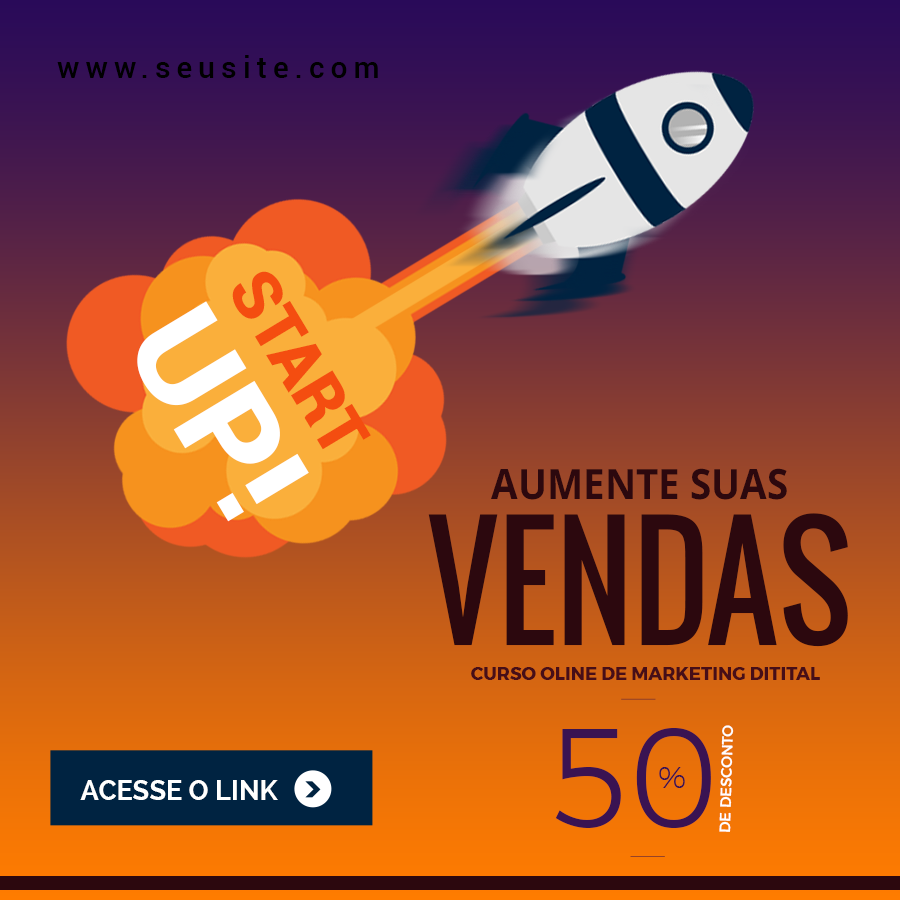
<style>
.page{position:relative;width:900px;height:900px}
.page>*{position:absolute;margin:0}
.t1{font:30px "Roboto-Medium";letter-spacing:0.2em;color:#000000}
.t2{font:68px "Roboto-Black";color:#f44d10}
.t3{font:132.2px "Roboto-Black";color:#ffffff}
.t4{font:41.9px/146px "OpenSans-Bold";color:#2c080e;text-transform:uppercase;scale:0.92 1}
.t5{font:149.3px/146px "Oswald-Regular";color:#2c080e;text-transform:uppercase;scale:0.92 1}
.t6{font:18px "Montserrat-Bold";color:#470e18;text-transform:uppercase}
.t7{font:14.8px "Montserrat-Medium";color:#ffffff;text-transform:uppercase}
.t8{font:140.3px "Montserrat-Light";color:#3a1352;text-transform:uppercase;scale:0.92 1}
.t9{font:30.1px "Montserrat-Light";color:#3a1352;text-transform:uppercase}
.t10{font:27px "Raleway-Bold";color:#ffffff}
</style>
<div class="page">
<p class="t1" style="left:57px;top:55px;width:321px;height:23px">www.seusite.com</p>
<p class="t2" style="left:232px;top:271px;width:139px;height:179px;rotate:59deg">START</p>
<p class="t3" style="left:137px;top:301px;width:172px;height:221px;rotate:59deg">UP!</p>
<p class="t4" style="left:428px;top:468px;width:420px;height:179px;text-align:center">aumente suas<br><span class="t5">vendas</span></p>
<p class="t6" style="left:471px;top:667px;width:349px;height:13px">curso oline de marketing ditital</p>
<p class="t7" style="left:719px;top:725px;width:15px;height:107px;rotate:-88deg">de desconto</p>
<p class="t8" style="left:555px;top:728px;width:156px;height:100px">50</p>
<p class="t9" style="left:659px;top:767px;width:26px;height:21px">%</p>
<p class="t10" style="left:80px;top:780px;width:198px;height:20px">ACESSE O LINK</p>
</div>
